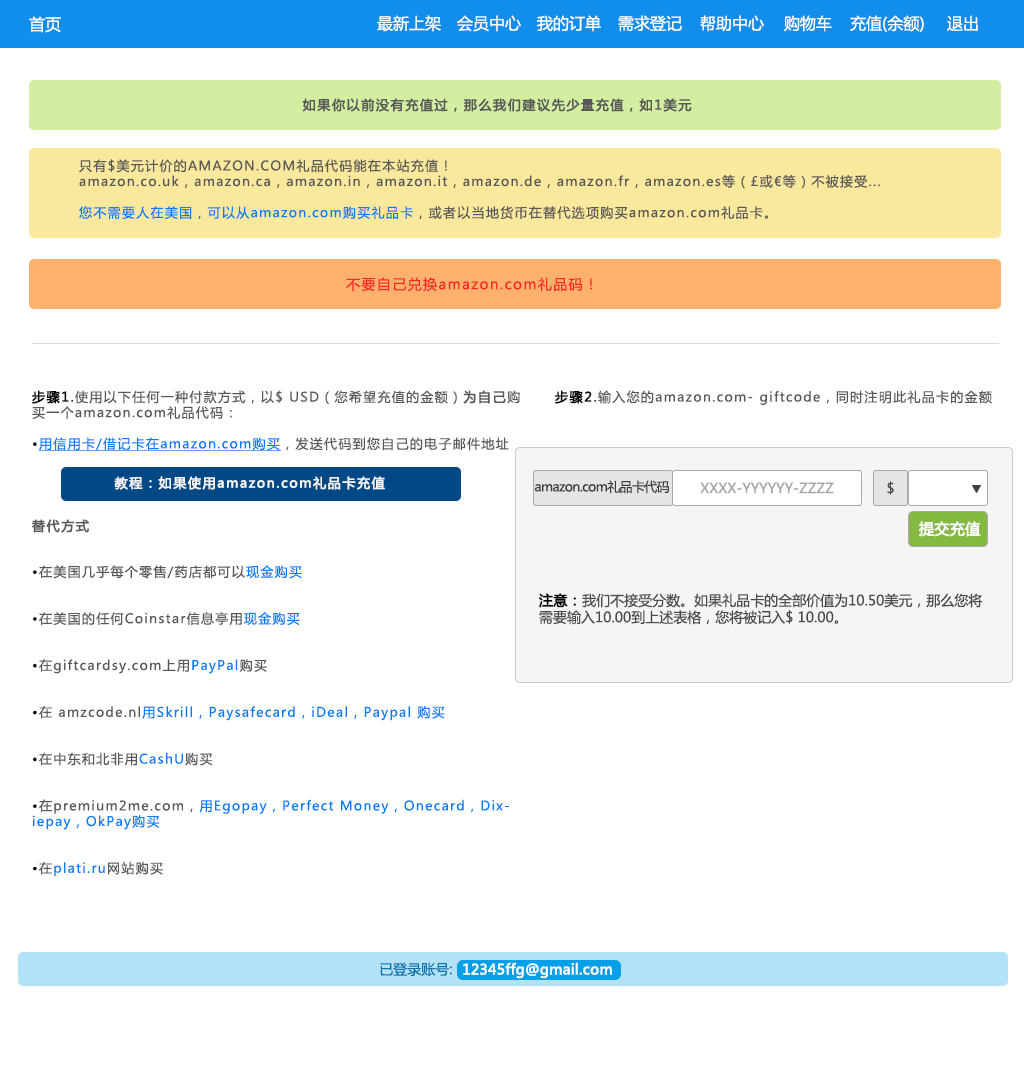
<style>
.page{position:relative;width:1024px;height:1080px;background:#ffffff}
.page>*{position:absolute;margin:0}
.t1{font:16px "MicrosoftYaHei";color:#ffffff}
.t2{font:13px "MicrosoftYaHei";letter-spacing:0.1em;color:#595858;font-weight:bold}
.t3{font:13px "MicrosoftYaHei";letter-spacing:0.1em;color:#595858}
.t4{font:13px "MicrosoftYaHei";letter-spacing:0.1em;color:#017cfa}
.t5{font:14px "MicrosoftYaHei";letter-spacing:0.1em;color:#fb2626}
.t6{font:13px "MicrosoftYaHei";letter-spacing:0.1em;color:#020202;font-weight:bold}
.t7{font:13px "MicrosoftYaHei";letter-spacing:0.1em;color:#020202}
.t8{font:13px "MicrosoftYaHei";letter-spacing:0.1em;color:#017cfa;text-decoration:underline}
.t9{font:13px "MicrosoftYaHei";letter-spacing:0.1em;color:#f5f5f5;font-weight:bold}
.t10{font:13px "MicrosoftYaHei";letter-spacing:-0.05em;color:#3d3c3c}
.t11{font:14px "MicrosoftYaHei";color:#a6a5a5}
.t12{font:14px "MicrosoftYaHei";color:#4a4a4a}
.t13{font:15px "MicrosoftYaHei";color:#fefefe;font-weight:bold}
.t14{font:14px "MicrosoftYaHei";color:#030303;font-weight:bold}
.t15{font:14px "MicrosoftYaHei";color:#0875ae}
.t16{font:14px "MicrosoftYaHei";color:#ffffff;font-weight:bold}
</style>
<div class="page">
<p class="t1" style="left:29px;top:16px;width:32px;height:17px">首页</p>
<p class="t1" style="left:377px;top:15px;width:64px;height:17px">最新上架</p>
<p class="t1" style="left:457px;top:15px;width:64px;height:17px">会员中心</p>
<p class="t1" style="left:537px;top:15px;width:64px;height:17px">我的订单</p>
<p class="t1" style="left:618px;top:15px;width:64px;height:17px">需求登记</p>
<p class="t1" style="left:700px;top:15px;width:64px;height:17px">帮助中心</p>
<p class="t1" style="left:784px;top:15px;width:48px;height:17px">购物车</p>
<p class="t1" style="left:850px;top:15px;width:74px;height:17px">充值(余额)</p>
<p class="t1" style="left:947px;top:15px;width:31px;height:16px">退出</p>
<p class="t2" style="left:302px;top:98px;width:390px;height:14px">如果你以前没有充值过，那么我们建议先少量充值，如1美元</p>
<p class="t3" style="left:79px;top:159px;width:801px;height:61px">只有$美元计价的AMAZON.COM礼品代码能在本站充值！<br>amazon.co.uk，amazon.ca，amazon.in，amazon.it，amazon.de，amazon.fr，amazon.es等（£或€等）不被接受... <br><br><span class="t4">您不需要人在美国，可以从amazon.com购买礼品卡</span>，或者以当地货币在替代选项购买amazon.com礼品卡。</p>
<p class="t5" style="left:346px;top:277px;width:246px;height:15px">不要自己兑换amazon.com礼品码！</p>
<p class="t3" style="left:32px;top:390px;width:488px;height:61px"><span class="t6">步骤1</span><span class="t7">.</span>使用以下任何一种付款方式，以$ USD（您希望充值的金额）<span class="t2">为自己</span>购买一个amazon.com礼品代码：<span class="t7"> <br><br>•</span><span class="t8">用信用卡/借记卡在amazon.com购买</span>，发送代码到您自己的电子邮件地址</p>
<p class="t3" style="left:555px;top:390px;width:437px;height:15px"><span class="t6">步骤2</span><span class="t7">.</span>输入您的amazon.com- giftcode，同时注明此礼品卡的金额</p>
<p class="t9" style="left:114px;top:476px;width:271px;height:14px">教程：如果使用amazon.com礼品卡充值</p>
<p class="t10" style="left:534px;top:480px;width:135px;height:14px">amazon.com礼品卡代码</p>
<p class="t11" style="left:700px;top:482px;width:134px;height:12px">XXXX-YYYYYY-ZZZZ</p>
<p class="t12" style="left:887px;top:481px;width:7px;height:14px">$</p>
<p class="t2" style="left:32px;top:519px;width:57px;height:14px">替代方式</p>
<p class="t13" style="left:918px;top:521px;width:63px;height:16px">提交充值</p>
<p class="t4" style="left:32px;top:565px;width:477px;height:312px"><span class="t7">•</span><span class="t3">在美国几乎每个零售/药店都可以</span>现金购买<br><br><br><span class="t7">•</span><span class="t3">在美国的任何Coinstar信息亭用</span>现金购买<br><br><br><span class="t7">•</span><span class="t3">在giftcardsy.com上用</span>PayPal<span class="t3">购买<br><br><br></span><span class="t7">•</span><span class="t3">在 amzcode.nl</span>用Skrill，Paysafecard，iDeal，Paypal 购买<br><br><br><span class="t7">•</span><span class="t3">在中东和北非用</span>CashU<span class="t3">购买<br><br><br></span><span class="t7">•</span><span class="t3">在premium2me.com，</span>用Egopay，Perfect Money，Onecard，Dixiepay，OkPay购买 <br><br><br><span class="t7">•</span><span class="t3">在</span>plati.ru<span class="t3">网站购买</span></p>
<p class="t12" style="left:539px;top:593px;width:444px;height:32px"><span class="t14">注意：</span>我们不接受分数。如果礼品卡的全部价值为10.50美元，那么您将需要输入10.00到上述表格，您将被记入$ 10.00。</p>
<p class="t15" style="left:380px;top:962px;width:72px;height:15px">已登录账号:</p>
<p class="t16" style="left:463px;top:962px;width:149px;height:17px">12345ffg@gmail.com</p>
</div>
